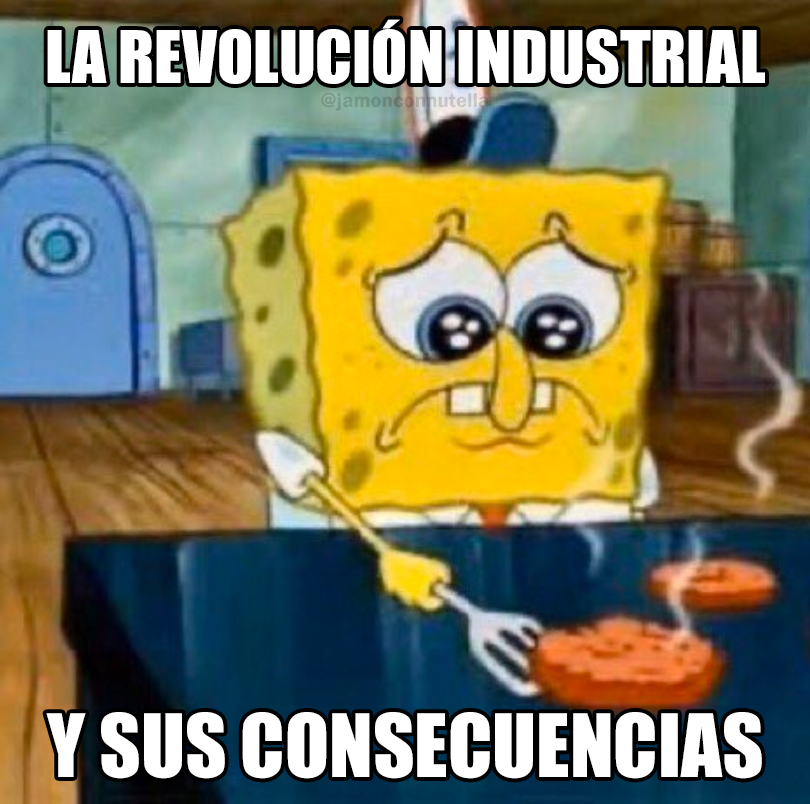
<style>
.page{position:relative;width:810px;height:804px}
.page>*{position:absolute;margin:0}
.t1{font:66.9px "Impact";color:#ffffff}
.t2{font:80.5px "Impact";color:#ffffff}
</style>
<div class="page">
<p class="t1" style="left:47px;top:19px;width:718px;height:65px">LA REVOLUCIÓN INDUSTRIAL</p>
<p class="t2" style="left:46px;top:712px;width:716px;height:67px">Y SUS CONSECUENCIAS</p>
</div>
